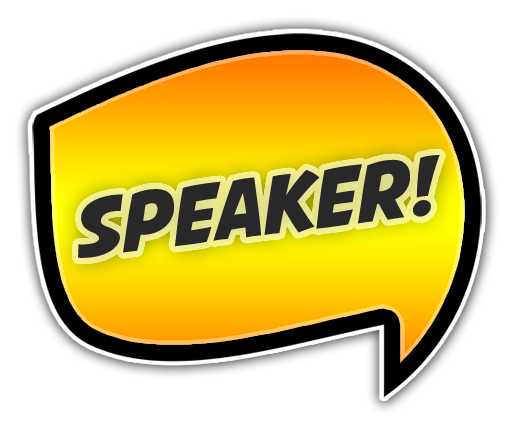
<style>
.page{position:relative;width:512px;height:431px;background:#ffffff}
.page>*{position:absolute;margin:0}
.t1{font:80.2px "AvengeanceMightiestAvenger";letter-spacing:-0.01em;color:#282828}
</style>
<div class="page">
<p class="t1" style="left:78px;top:155px;width:362px;height:103px;rotate:-7deg">SPEAKER!</p>
</div>
